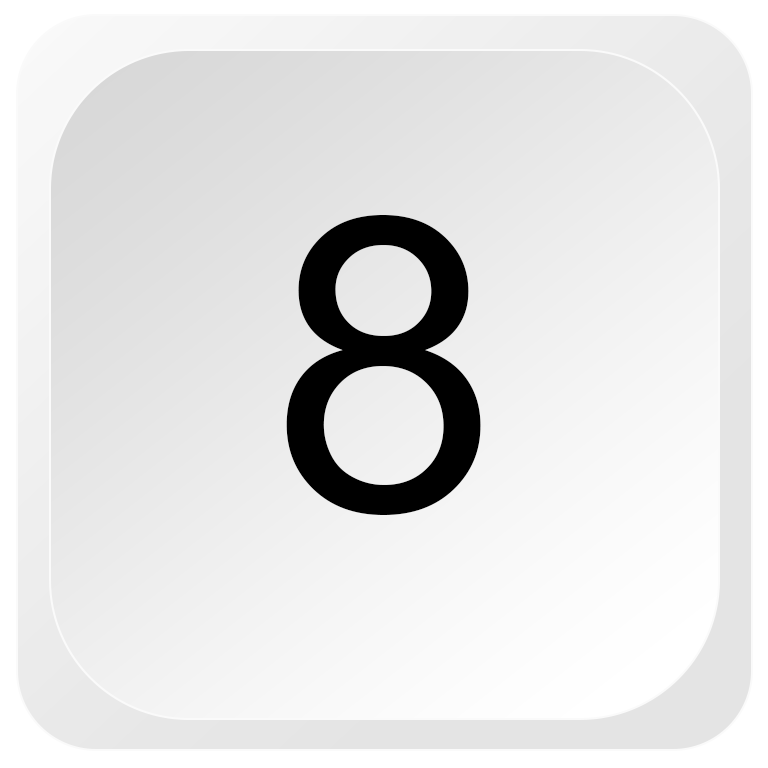
<style>
.page{position:relative;width:768px;height:768px}
.page>*{position:absolute;margin:0}
.t1{font:411px "ArialMT";color:#000000}
</style>
<div class="page">
<p class="t1" style="left:286px;top:215px;width:195px;height:300px">8</p>
</div>
